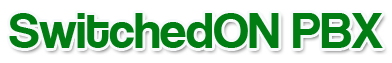
<style>
.page{position:relative;width:392px;height:63px;background:#ffffff}
.page>*{position:absolute;margin:0}
.t1{font:48.9px "Coolvetica";color:#017d13}
</style>
<div class="page">
<p class="t1" style="left:9px;top:13px;width:374px;height:35px">SwitchedON PBX</p>
</div>
